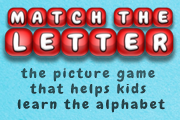
<style>
.page{position:relative;width:180px;height:120px}
.page>*{position:absolute;margin:0}
.t1{font:13px "Chewy";letter-spacing:0.12em;color:#29474e;scale:1.2 1}
</style>
<div class="page">
<p class="t1" style="left:17px;top:68px;width:148px;height:45px;text-align:center">the picture game <br>that helps kids <br>learn the alphabet</p>
</div>
